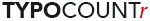
<style>
.page{position:relative;width:150px;height:21px;background:#ffffff}
.page>*{position:absolute;margin:0}
.t1{font:22px "Avenir-Black";color:#171b1e}
.t2{font:22px "Avenir-Medium";color:#171b1e}
.t3{font:20.8px "PTSerif-Italic";color:#d2000f}
</style>
<div class="page">
<p class="t1" style="left:2px;top:2px;width:59px;height:16px">TYPO</p>
<p class="t2" style="left:62px;top:2px;width:79px;height:16px">COUNT</p>
<p class="t3" style="left:139px;top:7px;width:9px;height:11px">r</p>
</div>
